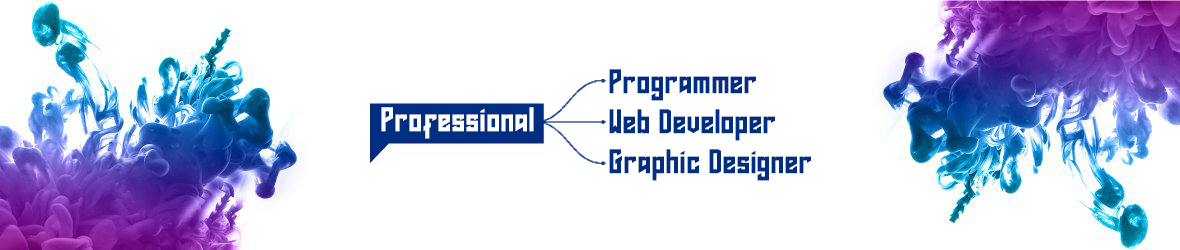
<style>
.page{position:relative;width:1180px;height:250px;background:#ffffff}
.page>*{position:absolute;margin:0}
.t1{font:24px/40px "CalveraPersonalUse";letter-spacing:0.06em;color:#002e82}
.t2{font:24px "CalveraPersonalUse";letter-spacing:0.06em;color:#ffffff}
</style>
<div class="page">
<p class="t1" style="left:609px;top:69px;width:202px;height:112px">Programmer<br>Web Developer<br>Graphic Designer</p>
<p class="t2" style="left:381px;top:107px;width:153px;height:32px">Professional</p>
</div>
